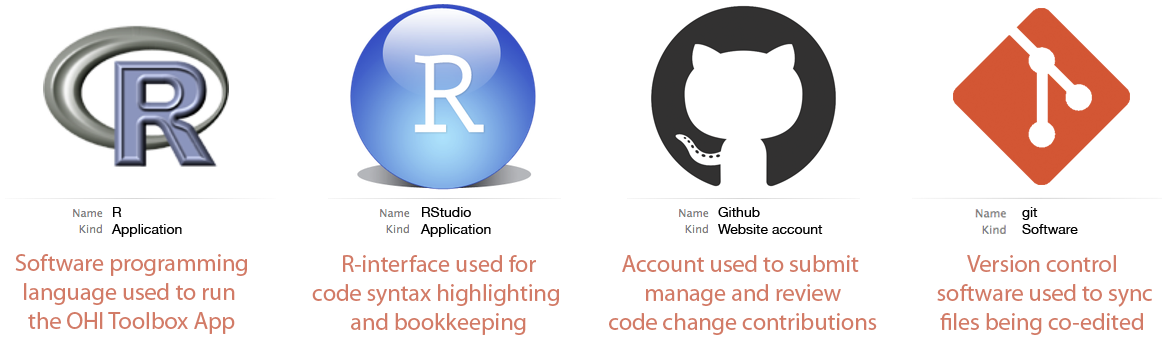
<style>
.page{position:relative;width:1162px;height:338px;background:#ffffff}
.page>*{position:absolute;margin:0}
.t1{font:14px "HelveticaNeue";color:#000000}
.t2{font:24px "MyriadPro-Regular";color:#d27b67}
</style>
<div class="page">
<p class="t1" style="left:111px;top:207px;width:71px;height:30px">R<br>Application</p>
<p class="t1" style="left:420px;top:207px;width:71px;height:30px">RStudio<br>Application</p>
<p class="t1" style="left:718px;top:207px;width:105px;height:27px">Github<br>Website account</p>
<p class="t1" style="left:1022px;top:207px;width:56px;height:27px">git<br>Software</p>
<p class="t2" style="left:15px;top:254px;width:232px;height:80px;text-align:center">Software programming<br>language used to run <br>the OHI Toolbox App</p>
<p class="t2" style="left:312px;top:255px;width:247px;height:80px;text-align:center">R-interface used for<br>code syntax highlighting <br>and bookkeeping</p>
<p class="t2" style="left:609px;top:255px;width:268px;height:80px;text-align:center">Account used to submit <br>manage and review<br>code change contributions</p>
<p class="t2" style="left:937px;top:255px;width:215px;height:80px;text-align:center">Version control <br>software used to sync<br>files being co-edited</p>
</div>
